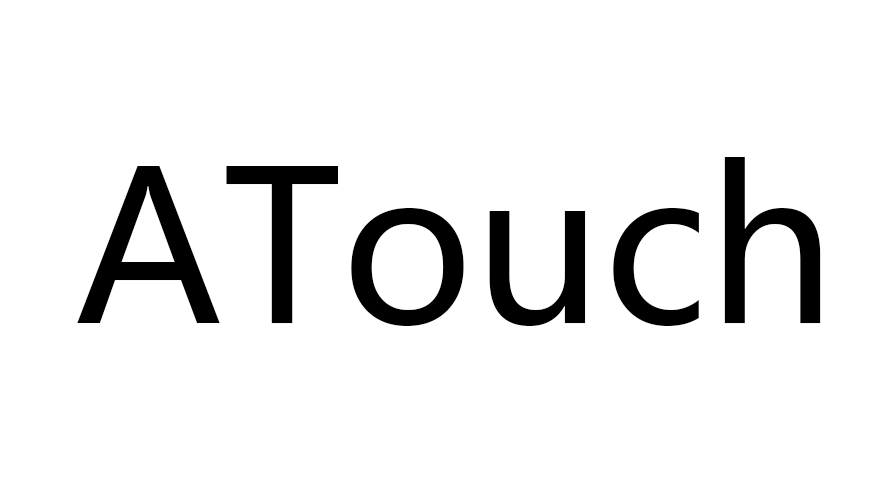
<style>
.page{position:relative;width:890px;height:492px;background:#ffffff}
.page>*{position:absolute;margin:0}
.t1{font:207.9px "MicrosoftYaHei";color:#000000}
</style>
<div class="page">
<p class="t1" style="left:77px;top:157px;width:744px;height:169px">ATouch</p>
</div>
